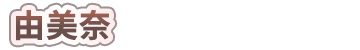
<style>
.page{position:relative;width:360px;height:50px;background:#ffffff}
.page>*{position:absolute;margin:0}
.t1{font:32px "SourceHanSansSC-Bold";font-weight:bold}
</style>
<div class="page">
<p class="t1" style="left:16px;top:9px;width:95px;height:32px">由美奈</p>
</div>
